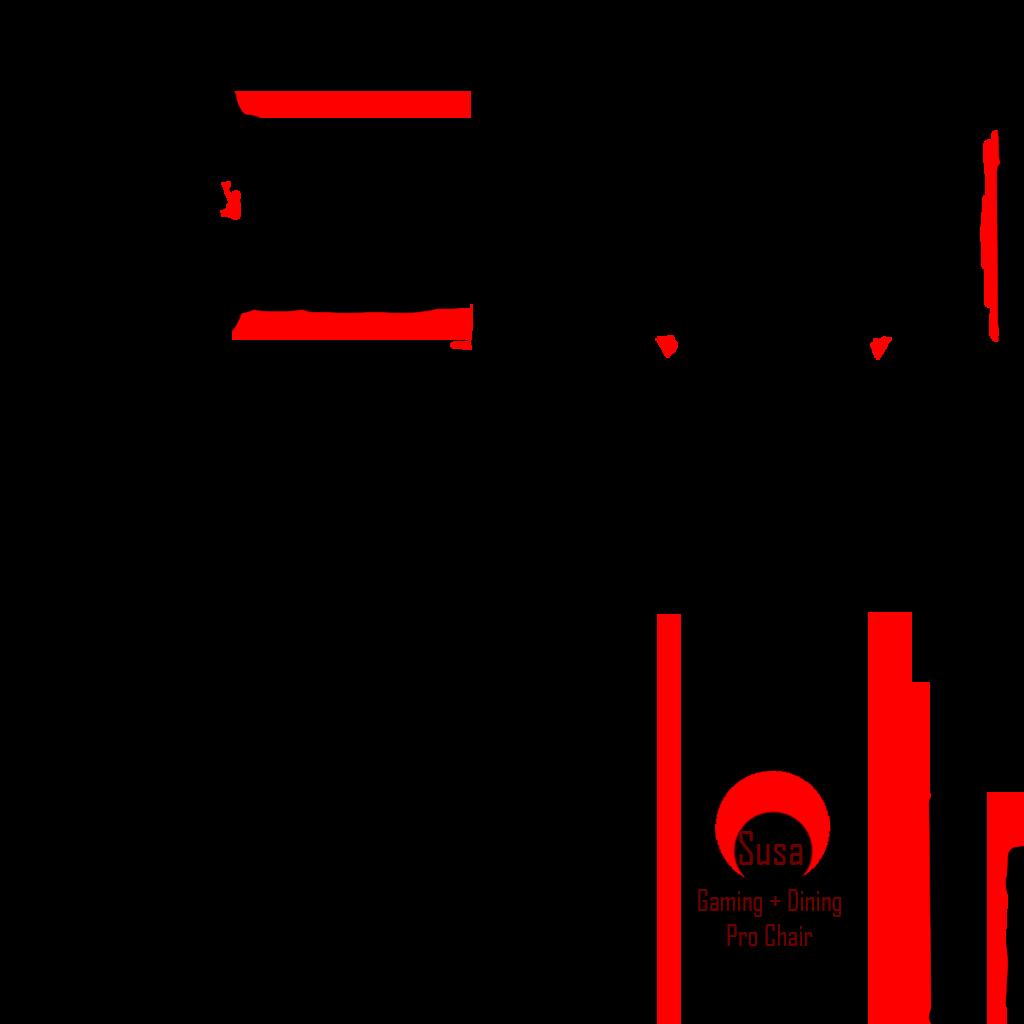
<style>
.page{position:relative;width:1024px;height:1024px;background:#000000}
.page>*{position:absolute;margin:0}
.t1{font:44px "AgencyFB-Reg";color:#6e0000}
.t2{font:29px "AgencyFB-Reg";color:#6e0000}
</style>
<div class="page">
<p class="t1" style="left:739px;top:831px;width:64px;height:34px">Susa</p>
<p class="t2" style="left:698px;top:889px;width:144px;height:57px;text-align:center">Gaming + Dining<br>Pro Chair</p>
</div>
